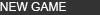
<style>
.page{position:relative;width:100px;height:15px;background:#333333}
.page>*{position:absolute;margin:0}
.t1{font:12px "HalfLife";color:#ffffff}
</style>
<div class="page">
<p class="t1" style="left:0px;top:2px;width:66px;height:9px">NEW GAME</p>
</div>
